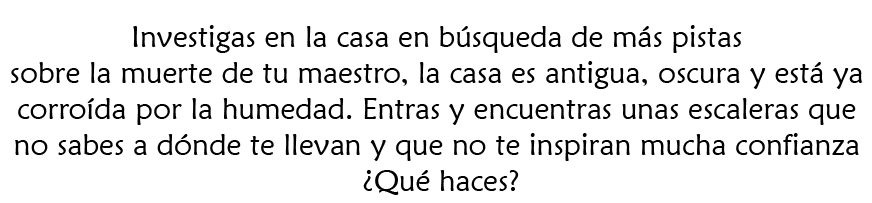
<style>
.page{position:relative;width:872px;height:203px;background:#ffffff}
.page>*{position:absolute;margin:0}
.t1{font:30px "MaiandraGD-Regular";color:#000000}
</style>
<div class="page">
<p class="t1" style="left:11px;top:25px;width:852px;height:170px;text-align:center">Investigas en la casa en búsqueda de más pistas <br>sobre la muerte de tu maestro, la casa es antigua, oscura y está ya <br>corroída por la humedad. Entras y encuentras unas escaleras que <br>no sabes a dónde te llevan y que no te inspiran mucha confianza <br>¿Qué haces?</p>
</div>
